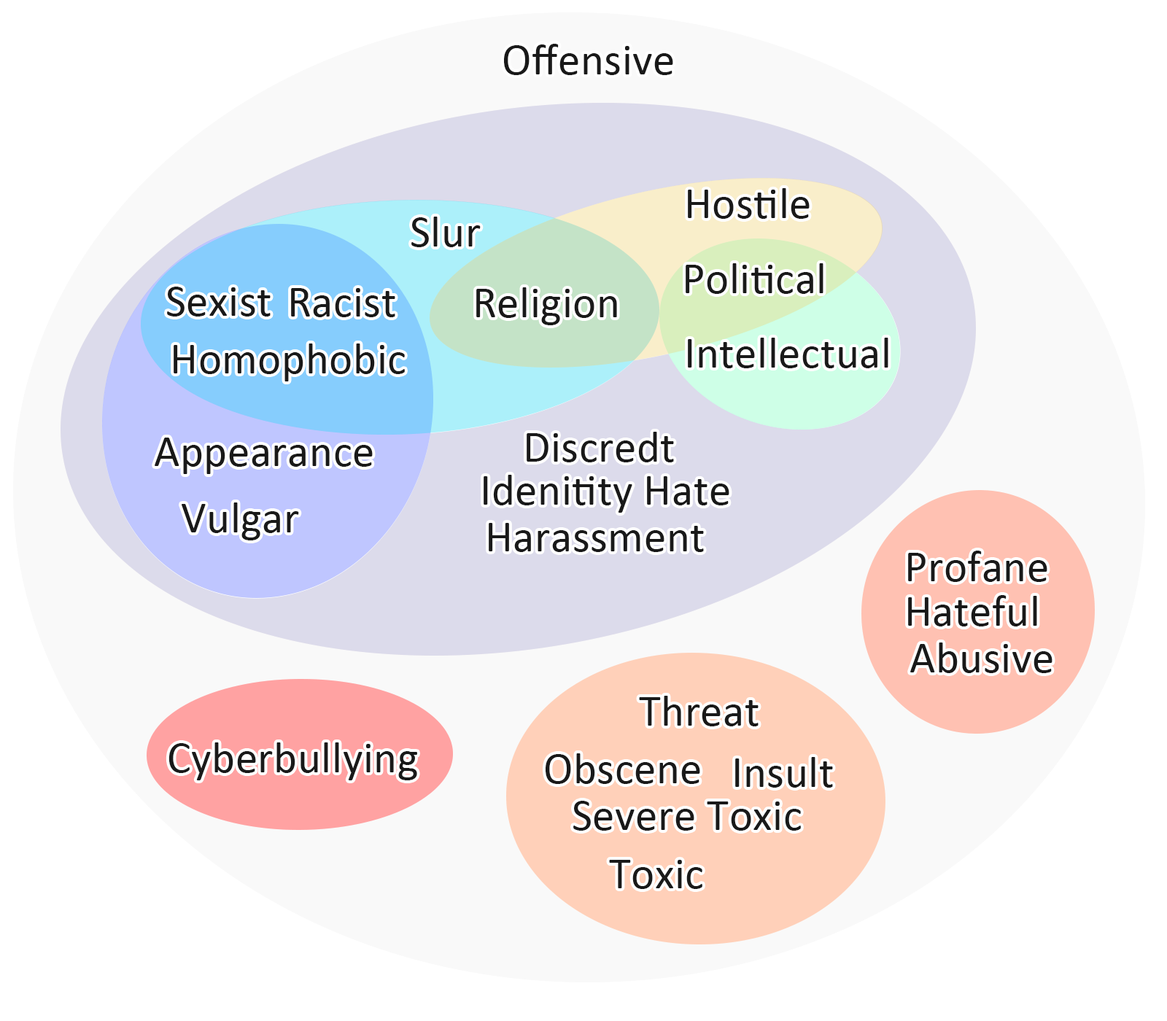
<style>
.page{position:relative;width:1167px;height:1021px;background:#ffffff}
.page>*{position:absolute;margin:0}
.t1{font:44.4px "Calibri";letter-spacing:0.01em;color:#282828}
</style>
<div class="page">
<p class="t1" style="left:504px;top:44px;width:169px;height:31px">Offensive</p>
<p class="t1" style="left:688px;top:188px;width:122px;height:31px">Hostile</p>
<p class="t1" style="left:412px;top:217px;width:69px;height:30px">Slur</p>
<p class="t1" style="left:686px;top:263px;width:138px;height:31px">Political</p>
<p class="t1" style="left:167px;top:287px;width:104px;height:30px">Sexist</p>
<p class="t1" style="left:291px;top:288px;width:104px;height:29px">Racist</p>
<p class="t1" style="left:476px;top:287px;width:141px;height:38px">Religion</p>
<p class="t1" style="left:688px;top:338px;width:201px;height:30px">Intellectual</p>
<p class="t1" style="left:174px;top:344px;width:231px;height:38px">Homophobic</p>
<p class="t1" style="left:155px;top:438px;width:218px;height:36px">Appearance</p>
<p class="t1" style="left:527px;top:432px;width:147px;height:31px">Discredt</p>
<p class="t1" style="left:484px;top:475px;width:246px;height:38px">Idenitity Hate</p>
<p class="t1" style="left:182px;top:503px;width:117px;height:38px">Vulgar</p>
<p class="t1" style="left:489px;top:523px;width:215px;height:29px">Harassment</p>
<p class="t1" style="left:908px;top:551px;width:140px;height:31px">Profane</p>
<p class="t1" style="left:908px;top:595px;width:130px;height:32px">Hateful</p>
<p class="t1" style="left:911px;top:643px;width:142px;height:30px">Abusive</p>
<p class="t1" style="left:639px;top:696px;width:120px;height:31px">Threat</p>
<p class="t1" style="left:169px;top:743px;width:248px;height:38px">Cyberbullying</p>
<p class="t1" style="left:546px;top:754px;width:154px;height:30px">Obscene</p>
<p class="t1" style="left:735px;top:757px;width:98px;height:31px">Insult</p>
<p class="t1" style="left:573px;top:801px;width:228px;height:30px">Severe Toxic</p>
<p class="t1" style="left:609px;top:860px;width:94px;height:29px">Toxic</p>
</div>
